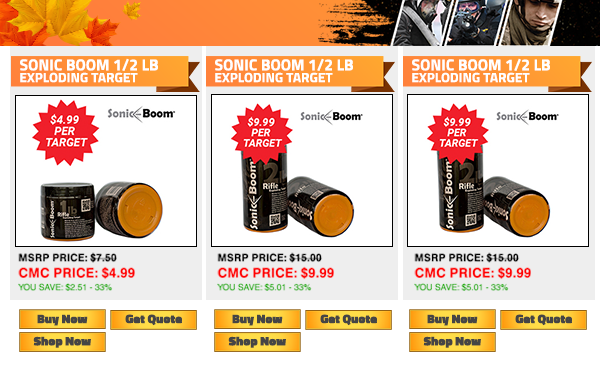
<style>
.page{position:relative;width:600px;height:367px;background:#ffffff}
.page>*{position:absolute;margin:0}
.t1{font:15.9px "Titillium-Bold";letter-spacing:0.005em;color:#ffffff}
.t2{font:13.3px "Titillium-Bold";letter-spacing:0.005em;color:#ffffff}
.t3{font:8.7px/12.7px "Helvetica";letter-spacing:0.005em;color:#19ae00}
.t4{font:10.6px "HelveticaGreek-Bold";letter-spacing:0.005em;color:#000000}
.t5{font:13.5px "HelveticaGreek-Bold";letter-spacing:0.005em;color:#ff0000}
.t6{font:13.5px/12.7px "HelveticaGreek-Bold";letter-spacing:0.005em;color:#ff0000}
.t7{font:12.3px "Titillium-Black";letter-spacing:0.005em;color:#454545}
</style>
<div class="page">
<p class="t1" style="left:20px;top:58px;width:138px;height:13px">SONIC BOOM 1/2 LB</p>
<p class="t1" style="left:215px;top:58px;width:138px;height:13px">SONIC BOOM 1/2 LB</p>
<p class="t1" style="left:412px;top:58px;width:138px;height:13px">SONIC BOOM 1/2 LB</p>
<p class="t2" style="left:20px;top:72px;width:118px;height:11px">EXPLODING TARGET</p>
<p class="t2" style="left:215px;top:72px;width:118px;height:11px">EXPLODING TARGET</p>
<p class="t2" style="left:412px;top:72px;width:118px;height:11px">EXPLODING TARGET</p>
<p class="t3" style="left:18px;top:252px;width:117px;height:39px"><span class="t4">MSRP PRICE: $7.50<br></span><span class="t5">CMC PRICE: $4</span><span class="t6">.99<br></span>YOU SAVE: $2.51 - 33%</p>
<p class="t3" style="left:217px;top:252px;width:117px;height:39px"><span class="t4">MSRP PRICE: $15.00<br></span><span class="t5">CMC PRICE: </span><span class="t6">$9.99<br></span>YOU SAVE: $5.01 - 33%</p>
<p class="t3" style="left:414px;top:252px;width:117px;height:39px"><span class="t4">MSRP PRICE: $15.00<br></span><span class="t5">CMC PRICE: </span><span class="t6">$9.99<br></span>YOU SAVE: $5.01 - 33%</p>
<p class="t7" style="left:37px;top:314px;width:51px;height:12px">Buy Now</p>
<p class="t7" style="left:125px;top:314px;width:57px;height:12px">Get Quote</p>
<p class="t7" style="left:232px;top:314px;width:51px;height:12px">Buy Now</p>
<p class="t7" style="left:320px;top:314px;width:57px;height:12px">Get Quote</p>
<p class="t7" style="left:427px;top:314px;width:51px;height:12px">Buy Now</p>
<p class="t7" style="left:515px;top:314px;width:57px;height:12px">Get Quote</p>
<p class="t7" style="left:33px;top:336px;width:58px;height:12px">Shop Now</p>
<p class="t7" style="left:228px;top:336px;width:58px;height:12px">Shop Now</p>
<p class="t7" style="left:423px;top:336px;width:58px;height:12px">Shop Now</p>
</div>
